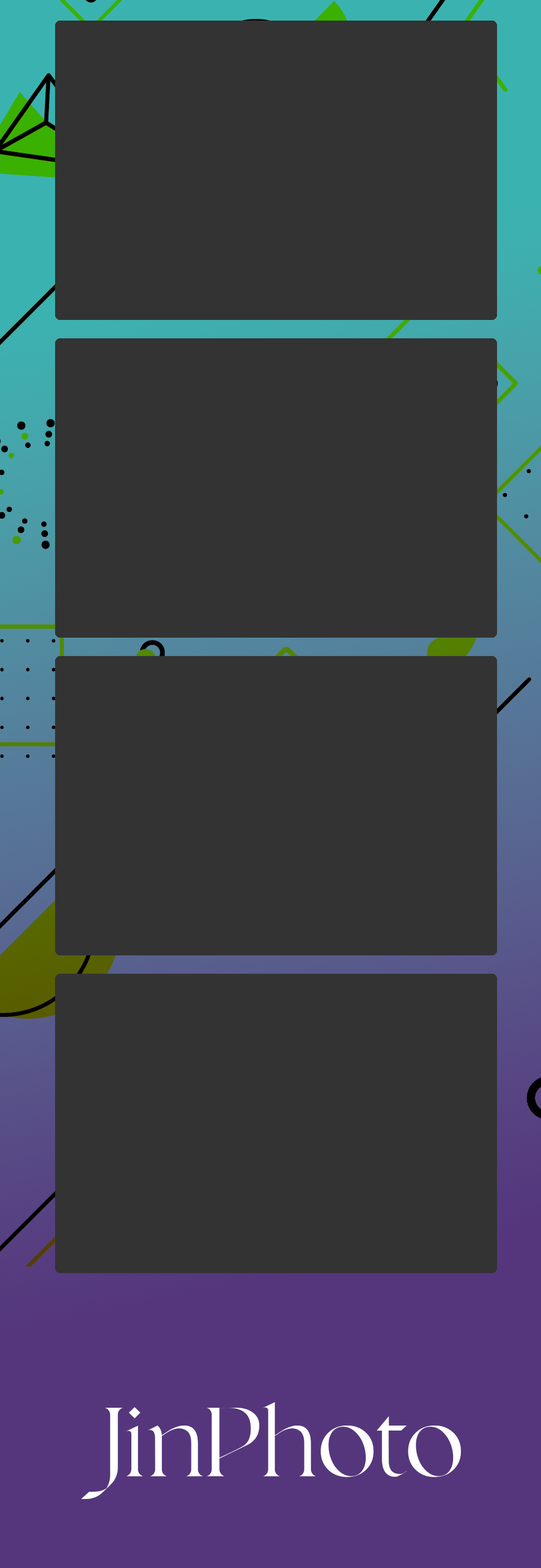
<style>
.page{position:relative;width:541px;height:1568px;background:#333333}
.page>*{position:absolute;margin:0}
.t1{font:99.6px "NVNValky-Light";color:#ffffff}
</style>
<div class="page">
<p class="t1" style="left:81px;top:1402px;width:380px;height:97px">JinPhoto</p>
</div>
